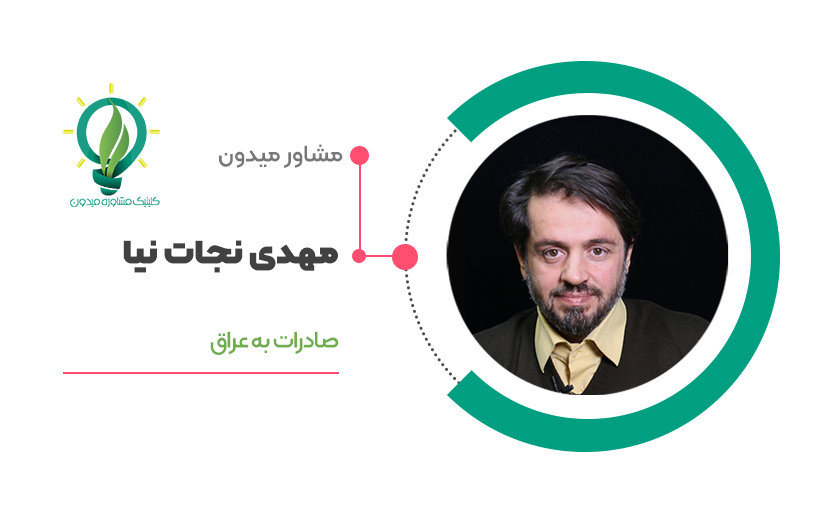
<style>
.page{position:relative;width:816px;height:512px;background:#ffffff}
.page>*{position:absolute;margin:0}
.t1{font:29.2px "Kalameh-Bold";color:#777777}
.t2{font:45.8px "Kalameh-Black";color:#414141}
.t3{font:29.2px "Kalameh-Bold";letter-spacing:-0.02em;color:#70ad50}
</style>
<div class="page">
<p class="t1" style="left:219px;top:144px;width:124px;height:24px">مشاور میدون</p>
<p class="t2" style="left:123px;top:240px;width:215px;height:33px">مهدی نجات نیا</p>
<p class="t3" style="left:210px;top:331px;width:129px;height:24px">صادرات به عراق</p>
</div>
